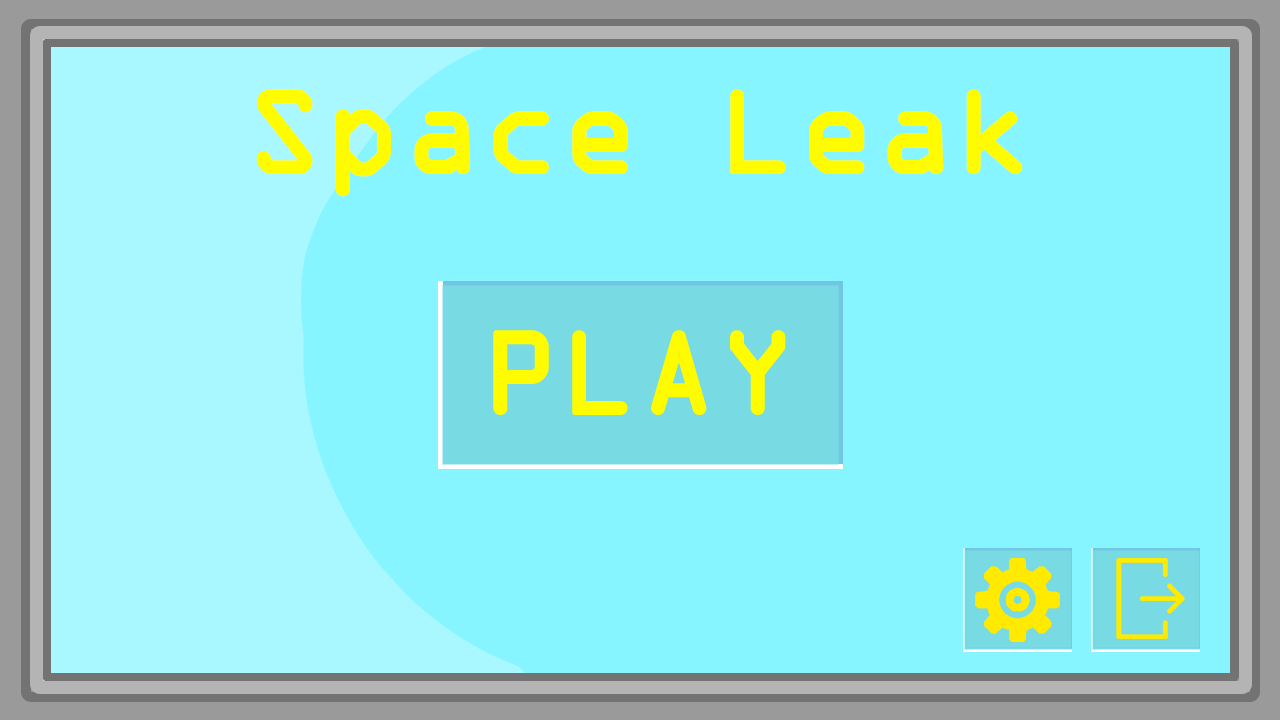
<style>
.page{position:relative;width:1280px;height:720px;background:#86f5ff}
.page>*{position:absolute;margin:0}
.t1{font:125px "OCRAExtended";color:#fffc00;font-weight:bold}
</style>
<div class="page">
<p class="t1" style="left:256px;top:89px;width:767px;height:108px">Space Leak</p>
</div>
